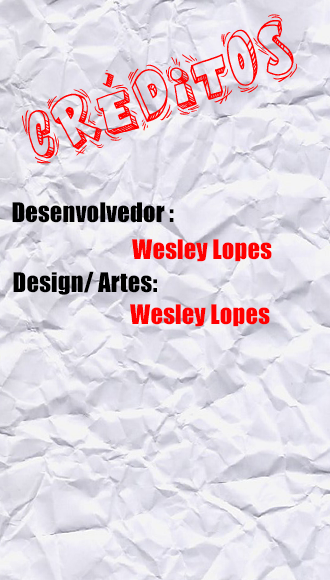
<style>
.page{position:relative;width:330px;height:580px}
.page>*{position:absolute;margin:0}
.t1{font:25px "Impact";color:#000000}
.t2{font:25px "Impact";color:#ff0000}
</style>
<div class="page">
<p class="t1" style="left:12px;top:202px;width:162px;height:21px">Desenvolvedor :</p>
<p class="t2" style="left:132px;top:239px;width:140px;height:23px">Wesley Lopes</p>
<p class="t1" style="left:13px;top:271px;width:144px;height:24px">Design/ Artes:</p>
<p class="t2" style="left:130px;top:304px;width:140px;height:23px">Wesley Lopes</p>
</div>
